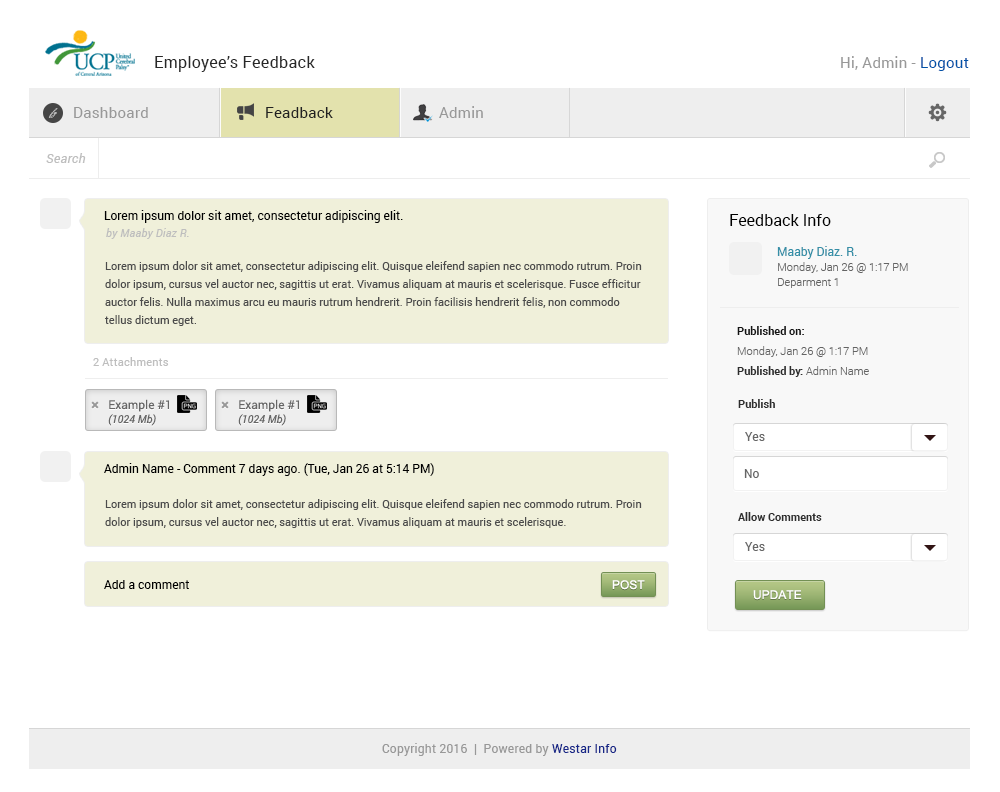
<style>
.page{position:relative;width:1000px;height:792px;background:#ffffff}
.page>*{position:absolute;margin:0}
.t1{font:16px "Roboto-Regular";letter-spacing:0.02em;color:#282828}
.t2{font:15px "Roboto-Regular";letter-spacing:0.02em;color:#989898}
.t3{font:15px "Roboto-Regular";letter-spacing:0.02em;color:#0053a8}
.t4{font:10px "BickhamScriptPro-Regular";letter-spacing:0.02em;color:#bababa}
.t5{font:15px "Roboto-Regular";letter-spacing:0.02em;color:#212121}
.t6{font:13px "Roboto-Italic";letter-spacing:0.02em;color:#bebebe}
.t7{font:12px "Roboto-Regular";color:#000000}
.t8{font:16px "Roboto-Regular";color:#000000}
.t9{font:11px "Roboto-Italic";letter-spacing:0.02em;color:#bebebe}
.t10{font:12px "Roboto-Regular";color:#368fa7}
.t11{font:11px/18px "Roboto-Regular";color:#4c4c4c}
.t12{font:11px "Roboto-Light";color:#646464}
.t13{font:11px/20px "Roboto-Light";color:#646464}
.t14{font:11px/20px "Roboto-Bold";color:#141414}
.t15{font:11px/20px "Roboto-Bold";color:#2d2d2d}
.t16{font:11px "Roboto-Regular";letter-spacing:0.02em;color:#bebebe}
.t17{font:12px "Roboto-Regular";color:#666666}
.t18{font:11px "Roboto-Bold";color:#2d2d2d}
.t19{font:11px "Roboto-Italic";color:#666666}
.t20{font:12px "ArialMT";color:#ffffff}
.t21{font:12px "Roboto-Regular";letter-spacing:0.02em;color:#989898}
.t22{font:12px "Roboto-Regular";letter-spacing:0.02em;color:#172788}
</style>
<div class="page">
<p class="t1" style="left:155px;top:56px;width:160px;height:16px">Employee’s Feedback</p>
<p class="t2" style="left:841px;top:56px;width:128px;height:15px">Hi, Admin - <span class="t3">Logout</span></p>
<p class="t4" style="left:48px;top:108px;width:10px;height:10px">fg</p>
<p class="t2" style="left:74px;top:107px;width:74px;height:11px">Dashboard</p>
<p class="t5" style="left:266px;top:107px;width:67px;height:11px">Feadback</p>
<p class="t2" style="left:439px;top:106px;width:44px;height:12px">Admin</p>
<p class="t6" style="left:46px;top:153px;width:40px;height:10px">Search</p>
<p class="t7" style="left:104px;top:210px;width:299px;height:13px">Lorem ipsum dolor sit amet, consectetur adipiscing elit.</p>
<p class="t8" style="left:730px;top:214px;width:101px;height:12px">Feedback Info</p>
<p class="t9" style="left:106px;top:228px;width:83px;height:11px">by Maaby Diaz R.</p>
<p class="t10" style="left:777px;top:246px;width:80px;height:13px">Maaby Diaz. R.</p>
<p class="t11" style="left:105px;top:261px;width:537px;height:65px">Lorem ipsum dolor sit amet, consectetur adipiscing elit. Quisque eleifend sapien nec commodo rutrum. Proin dolor ipsum, cursus vel auctor nec, sagittis ut erat. Vivamus aliquam at mauris et scelerisque. Fusce efficitur auctor felis. Nulla maximus arcu eu mauris rutrum hendrerit. Proin facilisis hendrerit felis, non commodo tellus dictum eget.</p>
<p class="t12" style="left:778px;top:262px;width:130px;height:11px">Monday, Jan 26 @ 1:17 PM</p>
<p class="t12" style="left:778px;top:278px;width:60px;height:10px">Deparment 1</p>
<p class="t13" style="left:737px;top:326px;width:132px;height:51px"><span class="t14">Published on:<br></span>Monday, Jan 26 @ 1:17 PM<br><span class="t15">Published by: </span>Admin Name</p>
<p class="t16" style="left:93px;top:357px;width:76px;height:9px">2 Attachments</p>
<p class="t17" style="left:109px;top:399px;width:60px;height:13px">Example #1</p>
<p class="t17" style="left:239px;top:399px;width:60px;height:13px">Example #1</p>
<p class="t18" style="left:738px;top:399px;width:37px;height:9px">Publish</p>
<p class="t19" style="left:108px;top:414px;width:48px;height:12px">(1024 Mb)</p>
<p class="t19" style="left:238px;top:414px;width:48px;height:12px">(1024 Mb)</p>
<p class="t17" style="left:745px;top:432px;width:20px;height:9px">Yes</p>
<p class="t7" style="left:104px;top:463px;width:330px;height:13px">Admin Name - Comment 7 days ago. (Tue, Jan 26 at 5:14 PM)</p>
<p class="t17" style="left:744px;top:469px;width:15px;height:9px">No</p>
<p class="t11" style="left:105px;top:499px;width:537px;height:29px">Lorem ipsum dolor sit amet, consectetur adipiscing elit. Quisque eleifend sapien nec commodo rutrum. Proin dolor ipsum, cursus vel auctor nec, sagittis ut erat. Vivamus aliquam at mauris et scelerisque.</p>
<p class="t18" style="left:738px;top:512px;width:84px;height:9px">Allow Comments</p>
<p class="t17" style="left:745px;top:542px;width:20px;height:9px">Yes</p>
<p class="t7" style="left:104px;top:580px;width:85px;height:9px">Add a comment</p>
<p class="t20" style="left:612px;top:580px;width:33px;height:10px">POST</p>
<p class="t20" style="left:753px;top:590px;width:49px;height:10px">UPDATE</p>
<p class="t21" style="left:382px;top:743px;width:235px;height:13px">Copyright 2016  |  Powered by <span class="t22">Westar Info</span></p>
</div>
